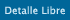
<style>
.page{position:relative;width:70px;height:20px;background:#006699}
.page>*{position:absolute;margin:0}
.t1{font:10px "LucidaSansUnicode";color:#cee6f2}
</style>
<div class="page">
<p class="t1" style="left:5px;top:6px;width:60px;height:9px">Detalle Libre</p>
</div>
